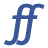
<style>
.page{position:relative;width:48px;height:48px;background:#ffffff}
.page>*{position:absolute;margin:0}
.t1{font:42.4px "ScalaSansBoldItalic";color:#3b5998}
</style>
<div class="page">
<p class="t1" style="left:3px;top:3px;width:42px;height:43px">ff</p>
</div>
